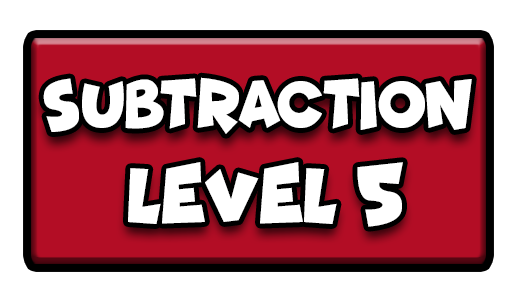
<style>
.page{position:relative;width:517px;height:301px;background:#ffffff}
.page>*{position:absolute;margin:0}
.t1{font:68.8px "Funhouse";color:#ffffff;scale:0.85 1}
.t2{font:77.7px "Funhouse";color:#ffffff;scale:0.95 1}
</style>
<div class="page">
<p class="t1" style="left:43px;top:77px;width:429px;height:57px">SUBTRACTION</p>
<p class="t2" style="left:128px;top:162px;width:275px;height:65px">LEVEL 5</p>
</div>
